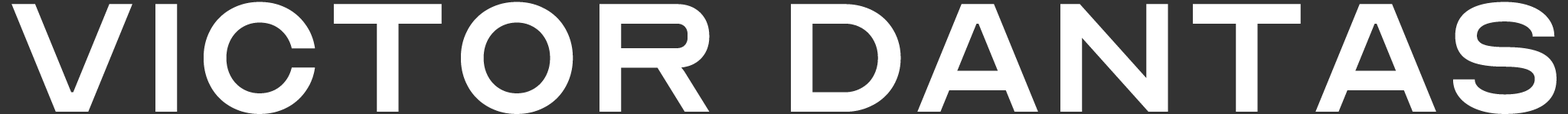
<style>
.page{position:relative;width:1568px;height:114px;background:#333333}
.page>*{position:absolute;margin:0}
.t1{font:215.2px "OpticianSans-Regular";color:#ffffff;text-transform:uppercase}
</style>
<div class="page">
<p class="t1" style="left:11px;top:2px;width:1546px;height:112px">victor dantas</p>
</div>
